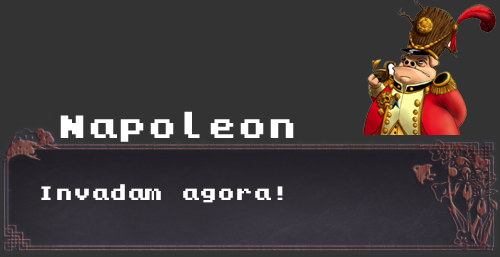
<style>
.page{position:relative;width:500px;height:257px;background:#333333}
.page>*{position:absolute;margin:0}
.t1{font:30px "KongtextRegular";color:#ffffff}
.t2{font:18px "KongtextRegular";color:#ffffff}
</style>
<div class="page">
<p class="t1" style="left:60px;top:111px;width:234px;height:31px">Napoleon</p>
<p class="t2" style="left:41px;top:184px;width:242px;height:19px">Invadam agora!</p>
</div>
